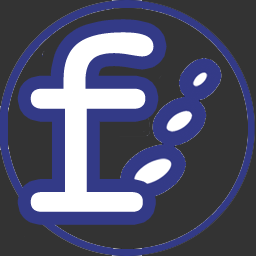
<style>
.page{position:relative;width:256px;height:256px;background:#333333}
.page>*{position:absolute;margin:0}
.t1{font:280px "Courier";color:#ffffff}
</style>
<div class="page">
<p class="t1" style="left:30px;top:32px;width:124px;height:180px">f</p>
</div>
